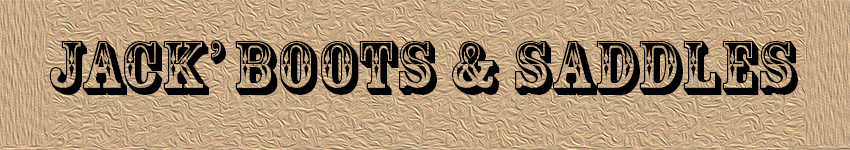
<style>
.page{position:relative;width:850px;height:150px}
.page>*{position:absolute;margin:0}
.t1{font:72px "RosewoodStd-Regular";color:#000000}
</style>
<div class="page">
<p class="t1" style="left:49px;top:40px;width:749px;height:55px">Jack’ Boots &amp; saddles</p>
</div>
